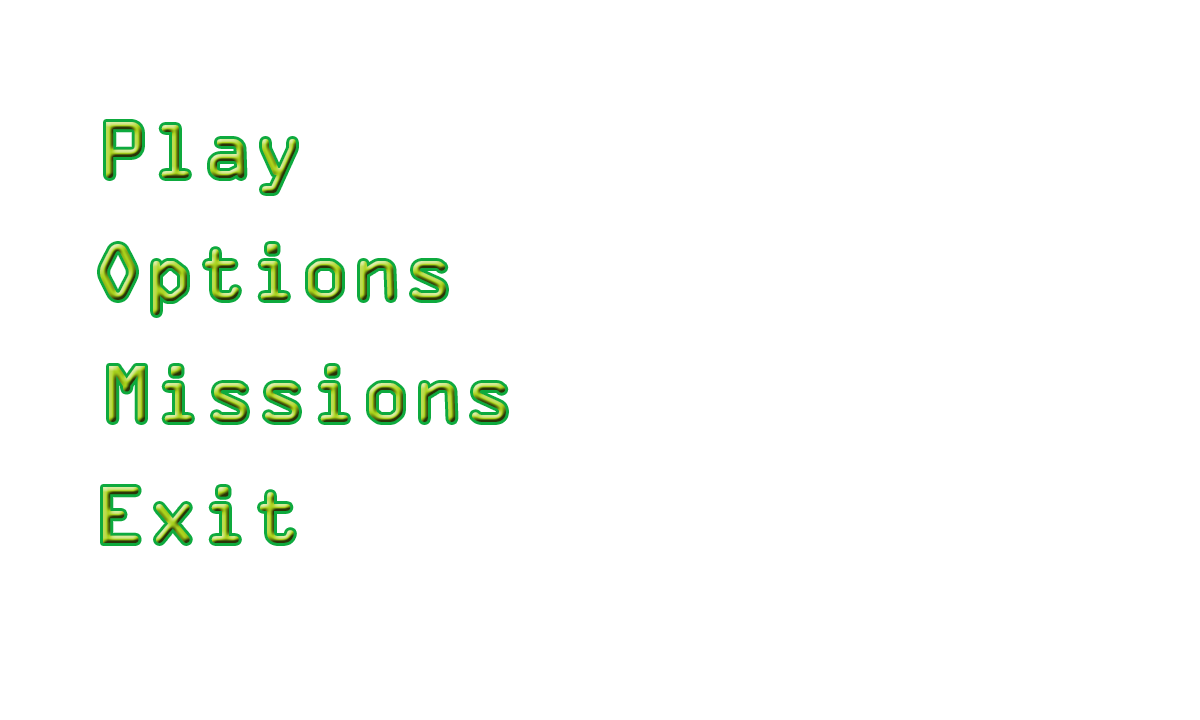
<style>
.page{position:relative;width:1200px;height:720px;background:#ffffff}
.page>*{position:absolute;margin:0}
.t1{font:72px "OCRAStd"}
</style>
<div class="page">
<p class="t1" style="left:106px;top:122px;width:190px;height:71px">Play</p>
<p class="t1" style="left:100px;top:244px;width:346px;height:71px">Options</p>
<p class="t1" style="left:109px;top:366px;width:397px;height:56px">Missions</p>
<p class="t1" style="left:103px;top:487px;width:191px;height:56px">Exit</p>
</div>
